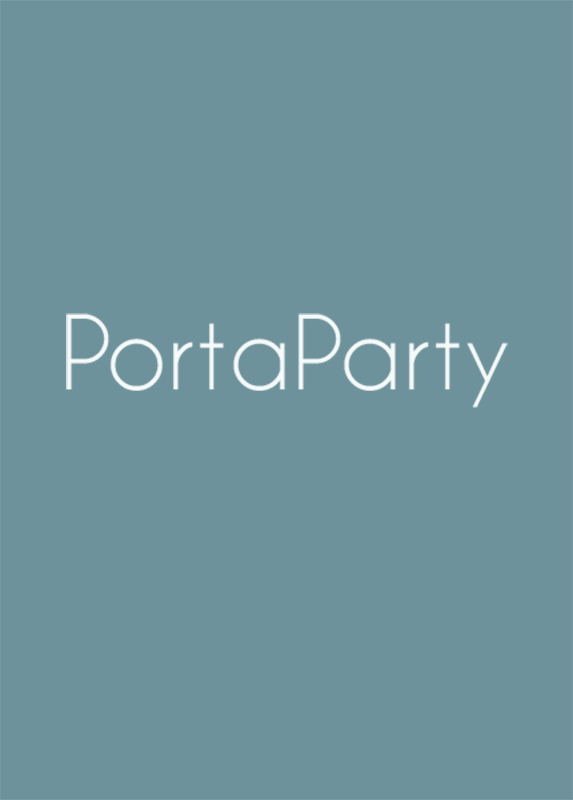
<style>
.page{position:relative;width:573px;height:800px;background:#6d929b}
.page>*{position:absolute;margin:0}
.t1{font:96px "CaviarDreams";color:#f5fafa}
</style>
<div class="page">
<p class="t1" style="left:66px;top:313px;width:442px;height:95px">PortaParty</p>
</div>
